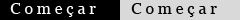
<style>
.page{position:relative;width:240px;height:20px;background:#000000}
.page>*{position:absolute;margin:0}
.t1{font:16px "Georgia";letter-spacing:0.24em;color:#ffffff}
.t2{font:16px "Georgia";letter-spacing:0.24em;color:#000000}
</style>
<div class="page">
<p class="t1" style="left:10px;top:3px;width:86px;height:14px">Começar</p>
<p class="t2" style="left:131px;top:3px;width:86px;height:14px">Começar</p>
</div>
